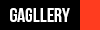
<style>
.page{position:relative;width:100px;height:30px;background:#000000}
.page>*{position:absolute;margin:0}
.t1{font:20px "BebasNeue";color:#ffffff}
</style>
<div class="page">
<p class="t1" style="left:10px;top:8px;width:60px;height:14px">GAgLLERY</p>
</div>
